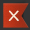
<style>
.page{position:relative;width:30px;height:30px;background:#333333}
.page>*{position:absolute;margin:0}
.t1{font:27px "Flamenco-Regular";color:#fbefda}
</style>
<div class="page">
<p class="t1" style="left:8px;top:10px;width:11px;height:11px">x</p>
</div>
